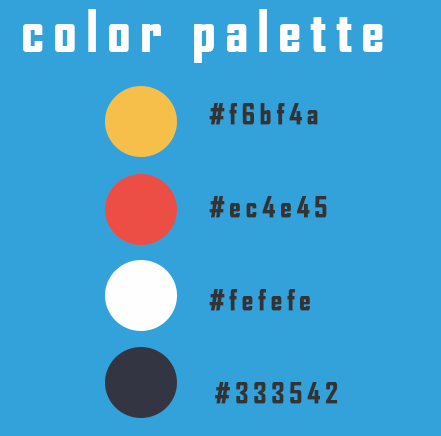
<style>
.page{position:relative;width:441px;height:436px;background:#33a2db}
.page>*{position:absolute;margin:0}
.t1{font:55px "AgencyFB-Bold";letter-spacing:0.16em;color:#ffffff;font-weight:bold}
.t2{font:27.9px "AgencyFB-Bold";letter-spacing:0.16em;color:#333333;font-weight:bold}
</style>
<div class="page">
<p class="t1" style="left:23px;top:9px;width:360px;height:54px">color palette</p>
<p class="t2" style="left:209px;top:103px;width:109px;height:22px">#f6bf4a</p>
<p class="t2" style="left:209px;top:196px;width:118px;height:22px">#ec4e45</p>
<p class="t2" style="left:209px;top:289px;width:101px;height:22px">#fefefe</p>
<p class="t2" style="left:215px;top:382px;width:123px;height:22px">#333542</p>
</div>
